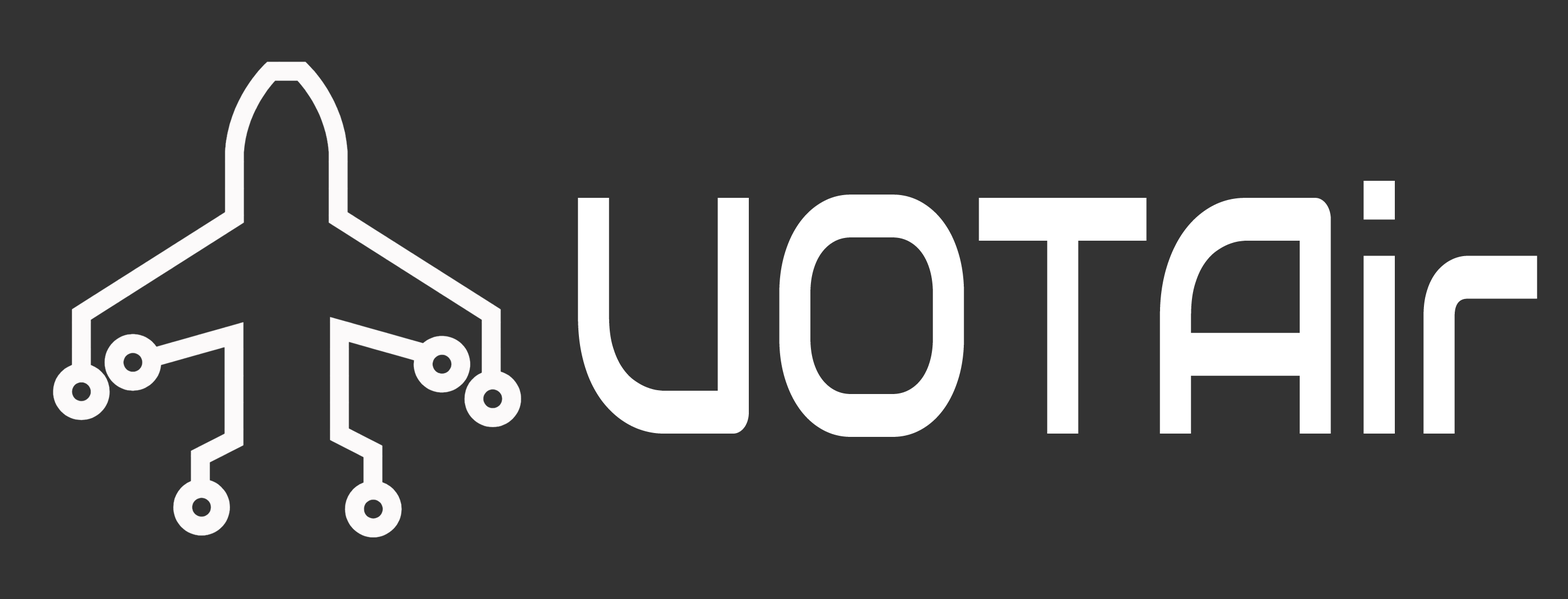
<style>
.page{position:relative;width:1568px;height:599px;background:#333333}
.page>*{position:absolute;margin:0}
.t1{font:336.6px "Audiowide-Regular";color:#ffffff;scale:0.72 1}
</style>
<div class="page">
<p class="t1" style="left:578px;top:181px;width:959px;height:256px">UOTAir</p>
</div>
